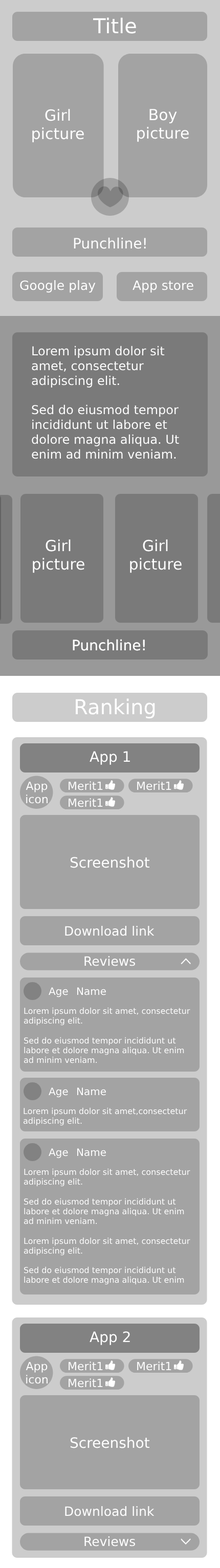
<style>
.page{position:relative;width:220px;height:1568px;background:#a3a3a3}
.page>*{position:absolute;margin:0}
.t1{font:20.4px "HeiseiKakuGoStd-W9";color:#ffffff}
.t2{font:15.3px "HeiseiKakuGoStd-W9";color:#ffffff}
.t3{font:14.3px "HeiseiKakuGoStd-W9";color:#ffffff}
.t4{font:12.8px "HeiseiKakuGoStd-W9";color:#ffffff}
.t5{font:12.3px "HeiseiKakuGoStd-W9";color:#ffffff}
.t6{font:11.2px "HeiseiKakuGoStd-W9";color:#ffffff}
.t7{font:10.2px "HeiseiKakuGoStd-W9";color:#ffffff}
.t8{font:8.2px "HeiseiKakuGoStd-W9";color:#ffffff}
</style>
<div class="page">
<p class="t1" style="left:93px;top:17px;width:43px;height:17px">Title</p>
<p class="t2" style="left:32px;top:109px;width:52px;height:34px;text-align:center">Girl<br>picture</p>
<p class="t2" style="left:137px;top:109px;width:52px;height:33px;text-align:center">Boy<br>picture</p>
<p class="t3" style="left:74px;top:237px;width:72px;height:12px">Punchline!</p>
<p class="t4" style="left:20px;top:280px;width:76px;height:13px">Google play</p>
<p class="t4" style="left:132px;top:280px;width:61px;height:13px">App store</p>
<p class="t5" style="left:32px;top:346px;width:147px;height:113px">Lorem ipsum dolor sit amet, consectetur adipiscing elit.<br><br>Sed do eiusmod tempor incididunt ut labore et dolore magna aliqua. Ut enim ad minim veniam.</p>
<p class="t2" style="left:33px;top:539px;width:51px;height:34px;text-align:center">Girl<br>picture</p>
<p class="t2" style="left:130px;top:539px;width:51px;height:34px;text-align:center">Girl<br>picture</p>
<p class="t3" style="left:73px;top:639px;width:72px;height:12px">Punchline!</p>
<p class="t3" style="left:73px;top:639px;width:72px;height:12px">Punchline!</p>
<p class="t1" style="left:76px;top:698px;width:79px;height:21px">Ranking</p>
<p class="t3" style="left:89px;top:751px;width:41px;height:14px">App 1</p>
<p class="t6" style="left:26px;top:782px;width:22px;height:22px;text-align:center">App<br>icon</p>
<p class="t6" style="left:69px;top:781px;width:34px;height:9px">Merit1</p>
<p class="t6" style="left:137px;top:781px;width:34px;height:9px">Merit1</p>
<p class="t6" style="left:69px;top:798px;width:34px;height:9px">Merit1</p>
<p class="t3" style="left:70px;top:856px;width:80px;height:12px">Screenshot</p>
<p class="t4" style="left:65px;top:926px;width:89px;height:10px">Download link</p>
<p class="t4" style="left:84px;top:956px;width:51px;height:10px">Reviews</p>
<p class="t7" style="left:49px;top:987px;width:19px;height:10px">Age</p>
<p class="t7" style="left:77px;top:987px;width:29px;height:8px">Name</p>
<p class="t8" style="left:24px;top:1007px;width:166px;height:56px">Lorem ipsum dolor sit amet, consectetur adipiscing elit.<br><br>Sed do eiusmod tempor incididunt ut labore et dolore magna aliqua. Ut enim ad minim veniam.</p>
<p class="t7" style="left:49px;top:1087px;width:19px;height:11px">Age</p>
<p class="t7" style="left:77px;top:1087px;width:29px;height:9px">Name</p>
<p class="t8" style="left:24px;top:1107px;width:163px;height:19px">Lorem ipsum dolor sit amet,consectetur adipiscing elit.</p>
<p class="t7" style="left:49px;top:1148px;width:19px;height:10px">Age</p>
<p class="t7" style="left:77px;top:1148px;width:29px;height:8px">Name</p>
<p class="t8" style="left:24px;top:1168px;width:166px;height:117px">Lorem ipsum dolor sit amet, consectetur adipiscing elit.<br><br>Sed do eiusmod tempor incididunt ut labore et dolore magna aliqua. Ut enim ad minim veniam.<br><br>Lorem ipsum dolor sit amet, consectetur adipiscing elit.<br><br>Sed do eiusmod tempor incididunt ut labore et dolore magna aliqua. Ut enim ad minim veniam.</p>
<p class="t3" style="left:89px;top:1331px;width:41px;height:14px">App 2</p>
<p class="t6" style="left:26px;top:1362px;width:22px;height:22px;text-align:center">App<br>icon</p>
<p class="t6" style="left:69px;top:1361px;width:34px;height:10px">Merit1</p>
<p class="t6" style="left:137px;top:1361px;width:34px;height:10px">Merit1</p>
<p class="t6" style="left:69px;top:1378px;width:34px;height:10px">Merit1</p>
<p class="t3" style="left:70px;top:1437px;width:80px;height:11px">Screenshot</p>
<p class="t4" style="left:65px;top:1506px;width:89px;height:10px">Download link</p>
<p class="t4" style="left:84px;top:1536px;width:51px;height:11px">Reviews</p>
</div>
